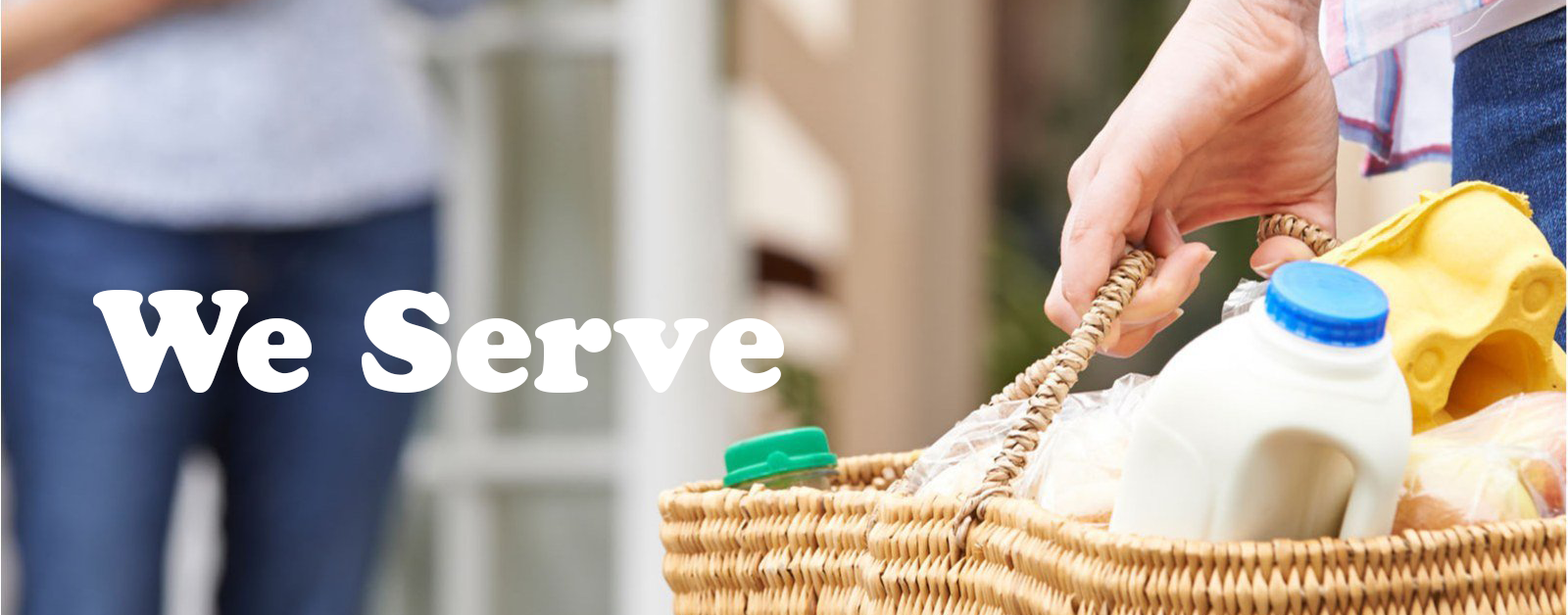
<style>
.page{position:relative;width:1568px;height:615px}
.page>*{position:absolute;margin:0}
.t1{font:141.1px "CooperBlackStd";color:#ffffff}
</style>
<div class="page">
<p class="t1" style="left:93px;top:290px;width:691px;height:103px">We Serve</p>
</div>
